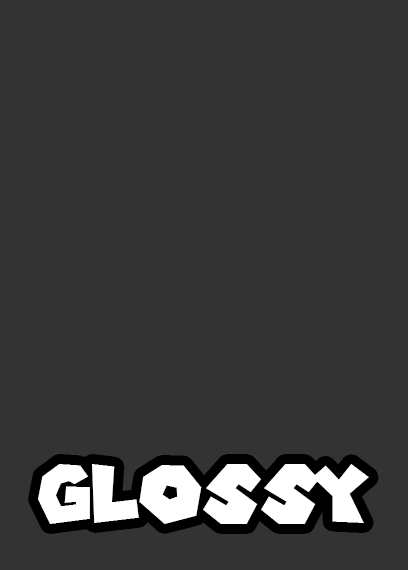
<style>
.page{position:relative;width:408px;height:570px;background:#333333}
.page>*{position:absolute;margin:0}
.t1{font:80px "SuperMarioGalaxy";color:#ffffff}
</style>
<div class="page">
<p class="t1" style="left:38px;top:464px;width:331px;height:60px">GLOSSY</p>
</div>
